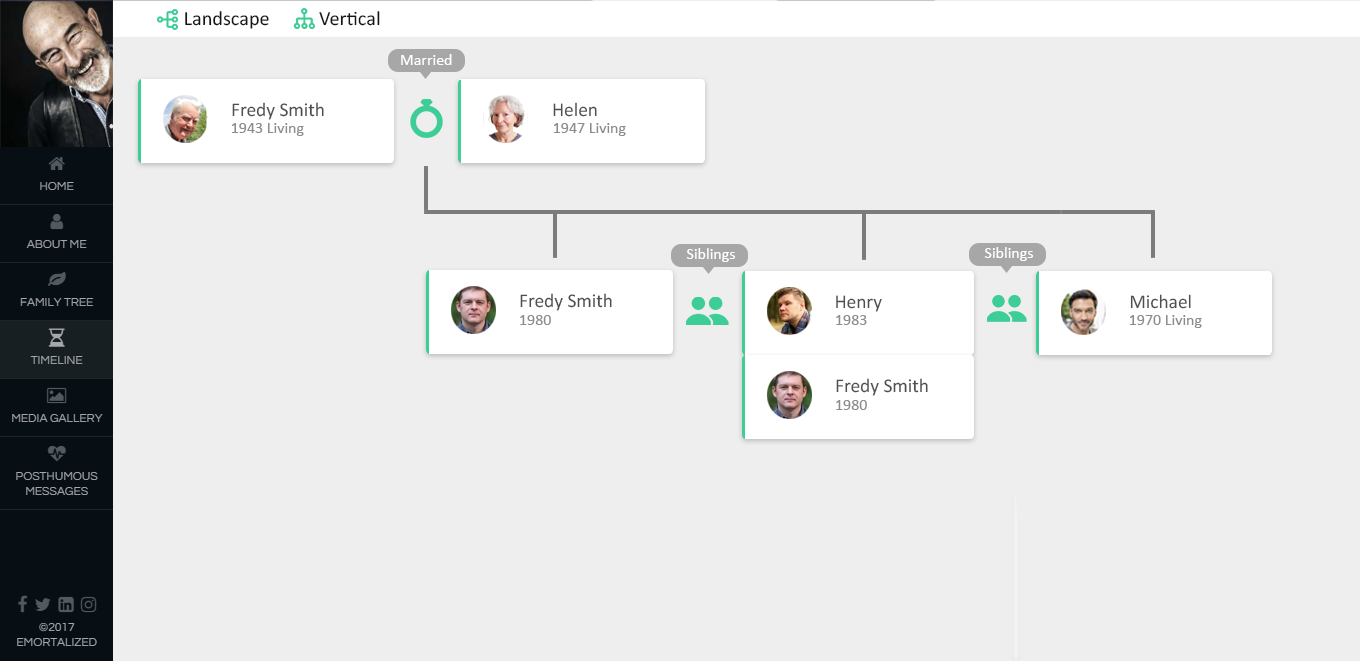
<style>
.page{position:relative;width:1360px;height:661px;background:#eeeeee}
.page>*{position:absolute;margin:0}
.t1{font:20.3px "Calibri";color:#161616}
.t2{font:16px "Calibri";color:#ffffff}
.t3{font:19.5px "Calibri";color:#505050}
.t4{font:16px "Calibri";color:#8c8c8c}
</style>
<div class="page">
<p class="t1" style="left:185px;top:11px;width:84px;height:18px">Landscape</p>
<p class="t1" style="left:319px;top:11px;width:61px;height:15px">Vertical</p>
<p class="t2" style="left:401px;top:54px;width:51px;height:11px">Married</p>
<p class="t3" style="left:232px;top:102px;width:92px;height:18px">Fredy Smith</p>
<p class="t3" style="left:553px;top:102px;width:44px;height:15px">Helen</p>
<p class="t4" style="left:232px;top:123px;width:72px;height:13px">1943 Living</p>
<p class="t4" style="left:554px;top:123px;width:72px;height:13px">1947 Living</p>
<p class="t2" style="left:686px;top:248px;width:49px;height:14px">Siblings</p>
<p class="t2" style="left:984px;top:247px;width:49px;height:14px">Siblings</p>
<p class="t3" style="left:520px;top:293px;width:92px;height:18px">Fredy Smith</p>
<p class="t3" style="left:1130px;top:294px;width:61px;height:15px">Michael</p>
<p class="t3" style="left:836px;top:295px;width:46px;height:17px">Henry</p>
<p class="t4" style="left:520px;top:315px;width:31px;height:10px">1980</p>
<p class="t4" style="left:836px;top:315px;width:31px;height:10px">1983</p>
<p class="t4" style="left:1130px;top:315px;width:72px;height:13px">1970 Living</p>
<p class="t3" style="left:836px;top:378px;width:92px;height:18px">Fredy Smith</p>
<p class="t4" style="left:836px;top:400px;width:31px;height:10px">1980</p>
</div>
